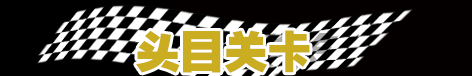
<style>
.page{position:relative;width:472px;height:76px;background:#040000}
.page>*{position:absolute;margin:0}
.t1{font:44px "CloudHeiChaoGBK";color:#caad20}
</style>
<div class="page">
<p class="t1" style="left:136px;top:30px;width:174px;height:43px">头目关卡</p>
</div>
